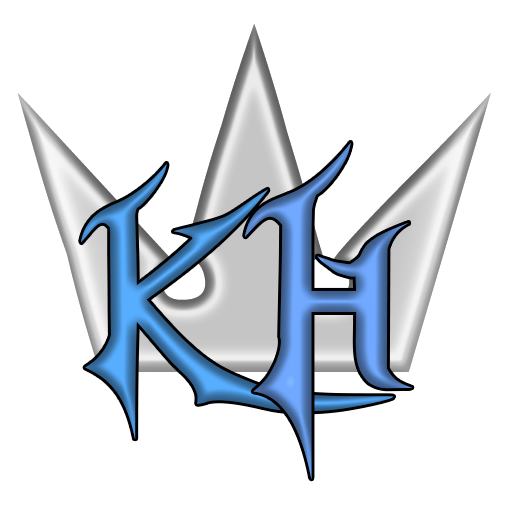
<style>
.page{position:relative;width:512px;height:512px;background:#ffffff}
.page>*{position:absolute;margin:0}
.t1{font:506.2px "KingdomHearts"}
.t2{font:395.8px "KingdomHearts"}
</style>
<div class="page">
<p class="t1" style="left:245px;top:142px;width:167px;height:337px">H</p>
<p class="t2" style="left:81px;top:163px;width:313px;height:276px">K</p>
</div>
